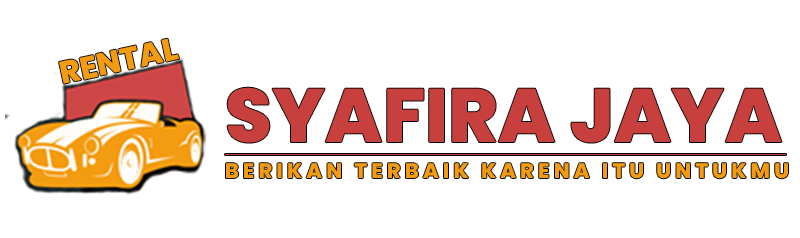
<style>
.page{position:relative;width:800px;height:238px;background:#ffffff}
.page>*{position:absolute;margin:0}
.t1{font:31.4px "Poppins-ExtraBold";color:#f39c12}
.t2{font:75.7px "Poppins-ExtraBold";color:#c7403e}
.t3{font:20.8px "Poppins-ExtraBold";letter-spacing:0.2em;color:#f39c12}
</style>
<div class="page">
<p class="t1" style="left:59px;top:38px;width:120px;height:46px;rotate:-12deg">RENTAL</p>
<p class="t2" style="left:227px;top:87px;width:555px;height:56px">SYAFIRA JAYA</p>
<p class="t3" style="left:226px;top:163px;width:562px;height:16px">BERIKAN TERBAIK KARENA ITU UNTUKMU</p>
</div>
